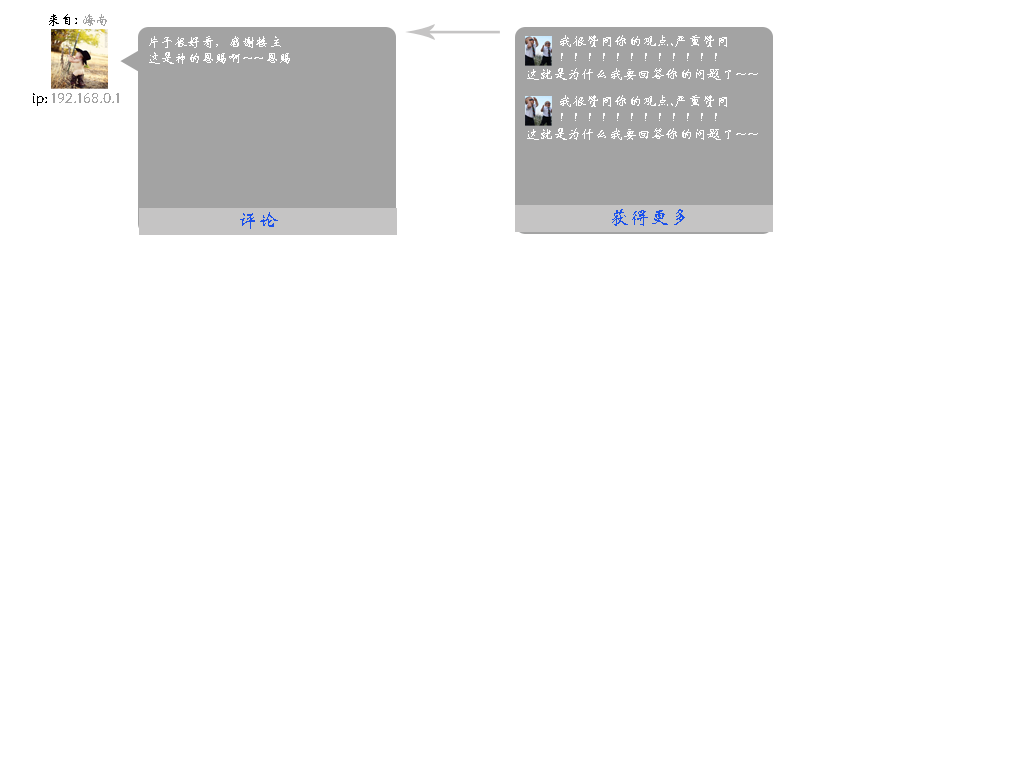
<style>
.page{position:relative;width:1024px;height:768px;background:#ffffff}
.page>*{position:absolute;margin:0}
.t1{font:14px "STXinwei";color:#000000}
.t2{font:14px "STXinwei";color:#a3a3a3}
.t3{font:14px "STXinwei";color:#ffffff;scale:0.97 1}
.t4{font:14px "STXinwei";color:#ffffff}
.t5{font:20px "STXinwei";color:#1b51ec}
</style>
<div class="page">
<p class="t1" style="left:49px;top:14px;width:58px;height:12px">来自: <span class="t2">海南</span></p>
<p class="t3" style="left:149px;top:36px;width:141px;height:28px">片子很好看，感谢楼主<br>这是神的恩赐啊~~恩赐</p>
<p class="t4" style="left:527px;top:35px;width:231px;height:45px">我很赞同你的观点,严重赞同<br>           ！！！！！！！！！！！！<br>这就是为什么我要回答你的问题了~~</p>
<p class="t2" style="left:33px;top:93px;width:86px;height:13px"><span class="t1">ip: </span>192.168.0.1</p>
<p class="t4" style="left:527px;top:95px;width:231px;height:45px">我很赞同你的观点,严重赞同<br>           ！！！！！！！！！！！！<br>这就是为什么我要回答你的问题了~~</p>
<p class="t5" style="left:612px;top:209px;width:73px;height:17px">获得更多</p>
<p class="t5" style="left:240px;top:212px;width:38px;height:17px">评论</p>
</div>
